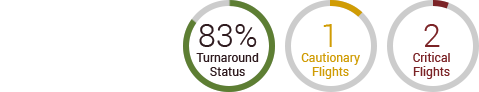
<style>
.page{position:relative;width:479px;height:92px;background:#ffffff}
.page>*{position:absolute;margin:0}
.t1{font:32px "Roboto-Light";color:#2f1b1f}
.t2{font:32px "Roboto-Light";color:#d09c04}
.t3{font:32px "Roboto-Light";color:#7b2326}
.t4{font:12px/14.1px "Roboto-Regular";color:#2f1b1f}
.t5{font:12px/14.1px "Roboto-Regular";color:#d09c04}
.t6{font:12px/14.1px "Roboto-Regular";color:#7b2326}
</style>
<div class="page">
<p class="t1" style="left:199px;top:24px;width:58px;height:23px">83%</p>
<p class="t2" style="left:323px;top:24px;width:9px;height:23px">1</p>
<p class="t3" style="left:424px;top:24px;width:16px;height:23px">2</p>
<p class="t4" style="left:196px;top:53px;width:63px;height:23px;text-align:center">Turnaround<br>Status</p>
<p class="t5" style="left:301px;top:52px;width:59px;height:27px;text-align:center">Cautionary<br>Flights</p>
<p class="t6" style="left:413px;top:52px;width:37px;height:27px;text-align:center">Critical<br>Flights</p>
</div>
